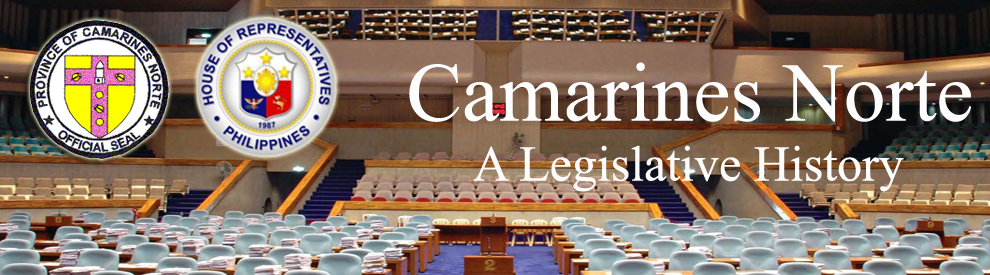
<style>
.page{position:relative;width:990px;height:275px}
.page>*{position:absolute;margin:0}
.t1{font:50px "TimesNewRomanPSMT";color:#fdfcfc}
.t2{font:83.3px "TimesNewRomanPSMT";color:#fdfdfd}
</style>
<div class="page">
<p class="t1" style="left:409px;top:62px;width:562px;height:130px;text-align:center"><span class="t2">Camarines Norte<br></span>A Legislative History</p>
</div>
